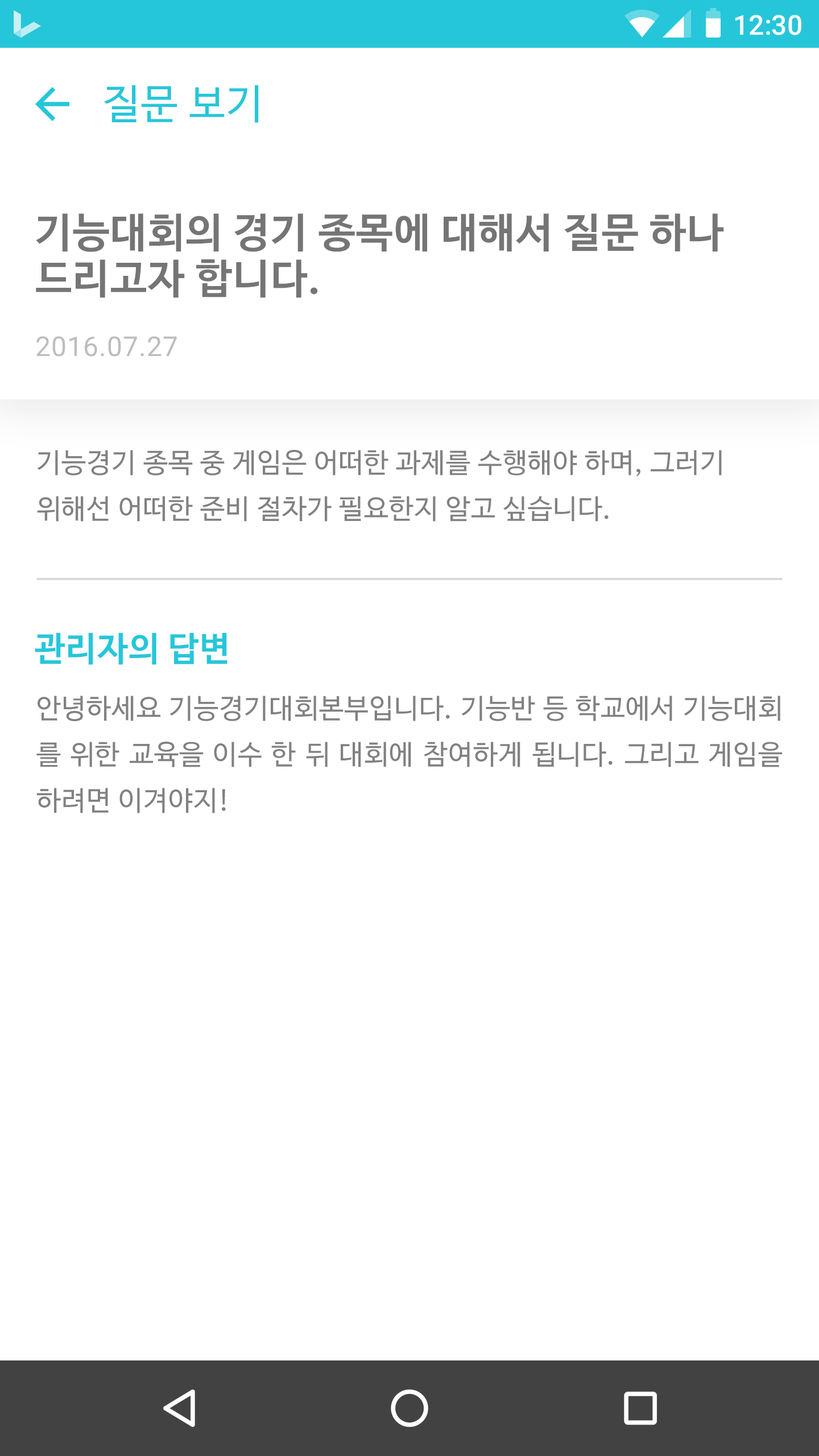
<style>
.page{position:relative;width:819px;height:1456px;background:#ffffff}
.page>*{position:absolute;margin:0}
.t1{font:27.3px "Roboto-Medium";color:#ffffff}
.t2{font:40.9px "NanumBarunGothic";letter-spacing:0.025em;color:#26c6da}
.t3{font:40.9px/46.1px "NanumBarunGothicBold";letter-spacing:0.025em;color:#757575}
.t4{font:27.3px "Roboto-Regular";letter-spacing:0.025em;color:#bdbdbd}
.t5{font:27.3px/46.1px "NanumBarunGothic";letter-spacing:0.025em;color:#818181}
.t6{font:34.1px "NanumBarunGothicBold";letter-spacing:0.025em;color:#26c6da}
</style>
<div class="page">
<p class="t1" style="left:735px;top:15px;width:66px;height:20px">12:30</p>
<p class="t2" style="left:104px;top:85px;width:155px;height:38px">질문 보기</p>
<p class="t3" style="left:36px;top:213px;width:688px;height:85px">기능대회의 경기 종목에 대해서 질문 하나<br>드리고자 합니다.</p>
<p class="t4" style="left:36px;top:336px;width:141px;height:21px">2016.07.27</p>
<p class="t5" style="left:37px;top:450px;width:685px;height:72px">기능경기 종목 중 게임은 어떠한 과제를 수행해야 하며, 그러기 위해선 어떠한 준비 절차가 필요한지 알고 싶습니다.</p>
<p class="t6" style="left:35px;top:632px;width:192px;height:33px">관리자의 답변</p>
<p class="t5" style="left:36px;top:696px;width:747px;height:117px;text-align:justify">안녕하세요 기능경기대회본부입니다. 기능반 등 학교에서 기능대회 를 위한 교육을 이수 한 뒤 대회에 참여하게 됩니다. 그리고 게임을 하려면 이겨야지!</p>
</div>
